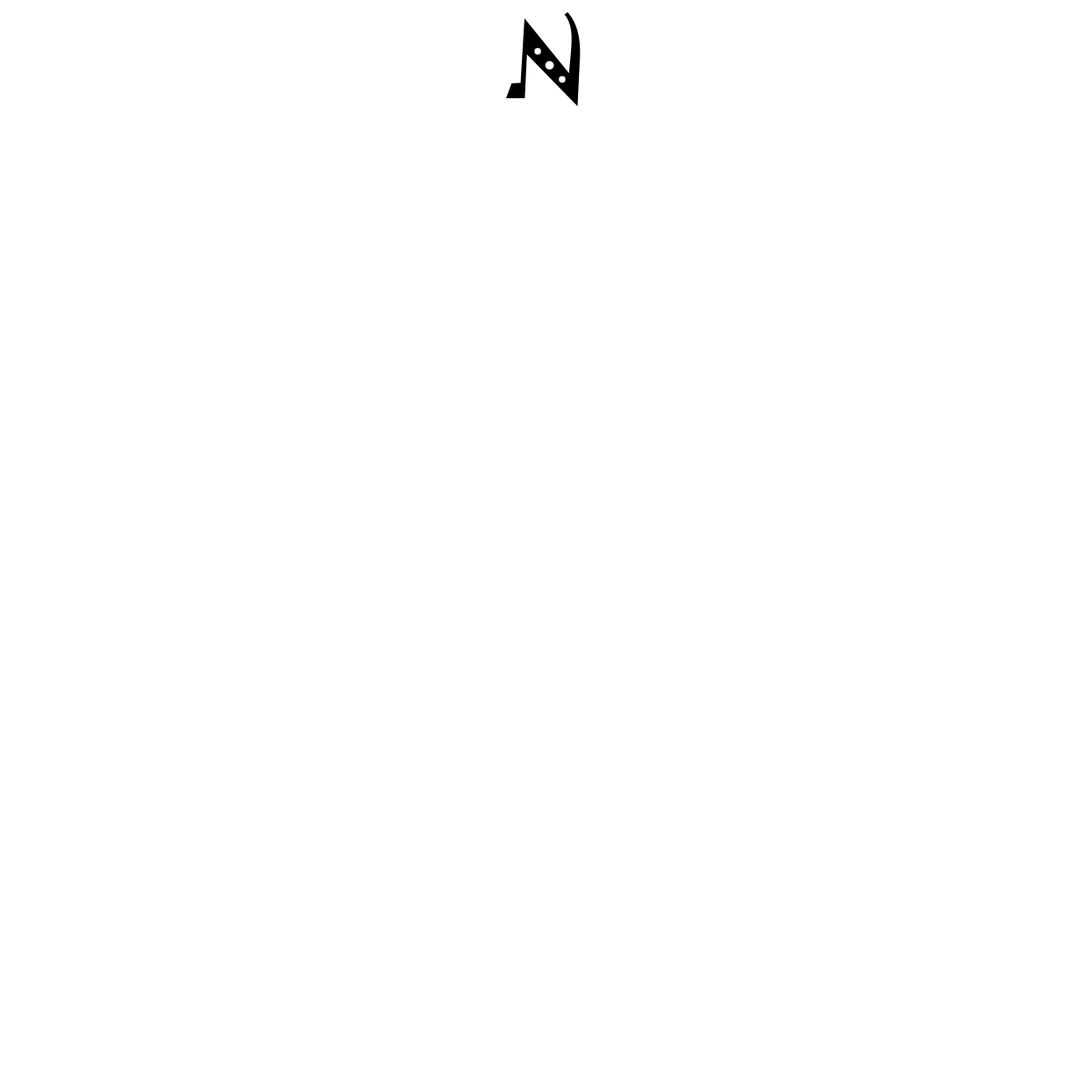
<style>
.page{position:relative;width:1092px;height:1092px;background:#ffffff}
.page>*{position:absolute;margin:0}
.t1{font:94.7px "Jokerman-Regular";color:#000000}
</style>
<div class="page">
<p class="t1" style="left:506px;top:12px;width:75px;height:94px">N</p>
</div>
